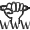
<style>
.page{position:relative;width:30px;height:30px;background:#ffffff}
.page>*{position:absolute;margin:0}
.t1{font:18px "Ardeco";color:#282828}
</style>
<div class="page">
<p class="t1" style="left:0px;top:19px;width:31px;height:11px">www</p>
</div>
